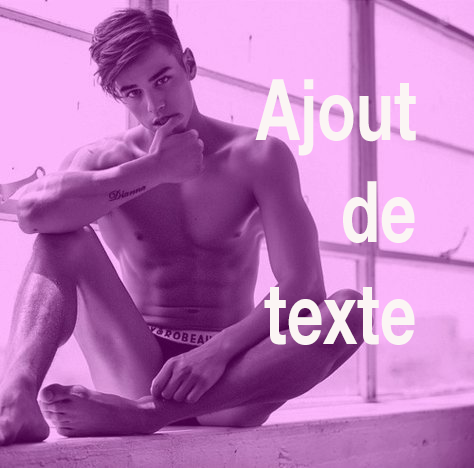
<style>
.page{position:relative;width:474px;height:468px}
.page>*{position:absolute;margin:0}
.t1{font:85px "HelveticaNeue-Bold";color:#fbf5f4}
</style>
<div class="page">
<p class="t1" style="left:255px;top:79px;width:161px;height:266px;text-align:right">Ajout <br>de<br>texte</p>
</div>
